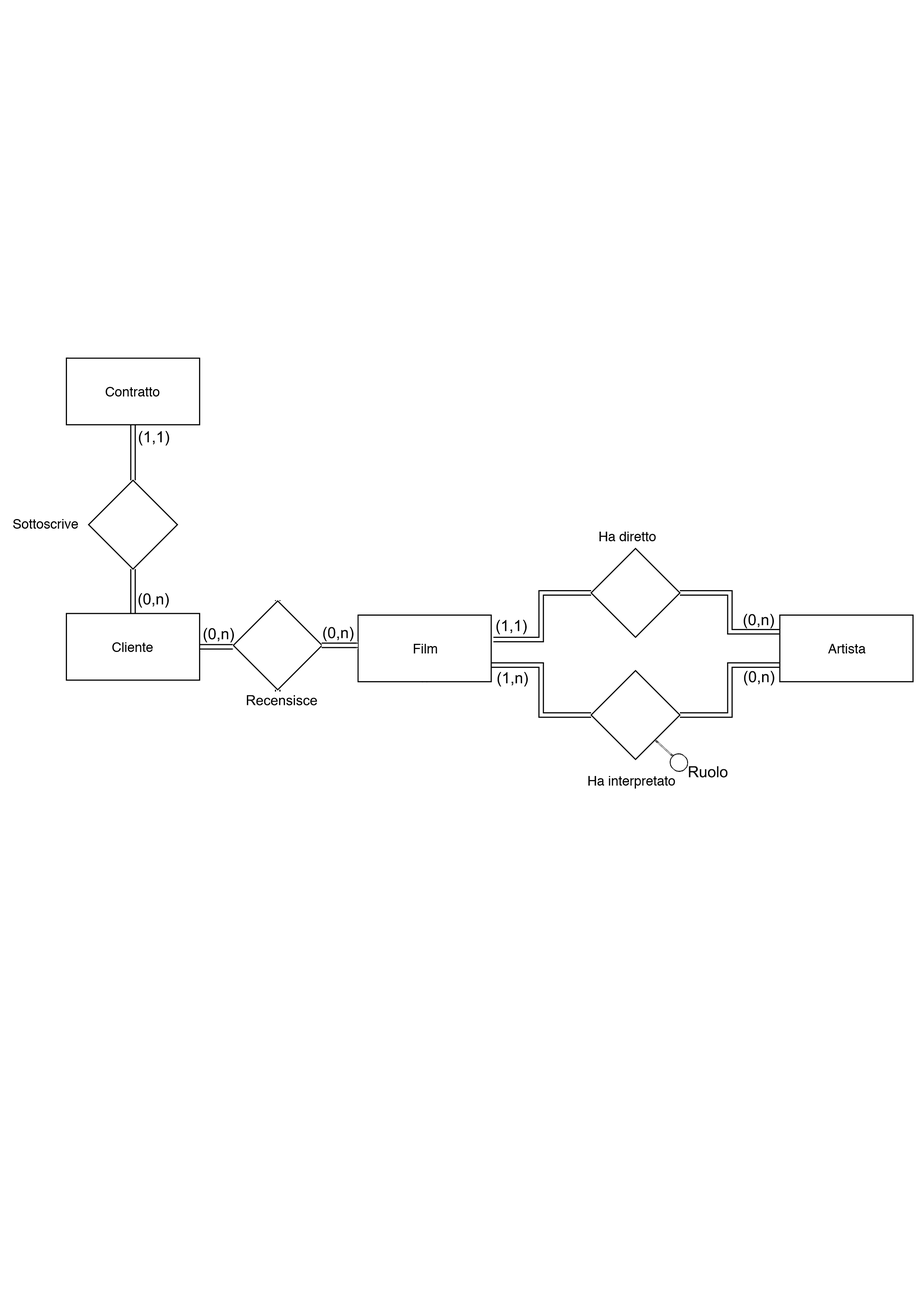
<style>
.page{position:relative;width:919px;height:1298px;background:#ffffff}
.page>*{position:absolute;margin:0}
.t1{font:15.4px "ArialMT";color:#050505}
.t2{font:13.9px "ArialMT";color:#050505}
</style>
<div class="page">
<p class="t1" style="left:139px;top:431px;width:30px;height:15px">(1,1)</p>
<p class="t1" style="left:138px;top:593px;width:31px;height:15px">(0,n)</p>
<p class="t1" style="left:744px;top:614px;width:30px;height:14px">(0,n)</p>
<p class="t1" style="left:204px;top:628px;width:30px;height:14px">(0,n)</p>
<p class="t1" style="left:323px;top:627px;width:30px;height:14px">(0,n)</p>
<p class="t1" style="left:496px;top:620px;width:31px;height:14px">(1,1)</p>
<p class="t1" style="left:497px;top:672px;width:31px;height:15px">(1,n)</p>
<p class="t1" style="left:744px;top:671px;width:30px;height:14px">(0,n)</p>
<p class="t2" style="left:247px;top:695px;width:70px;height:10px">Recensisce</p>
<p class="t1" style="left:689px;top:766px;width:39px;height:11px">Ruolo</p>
</div>
